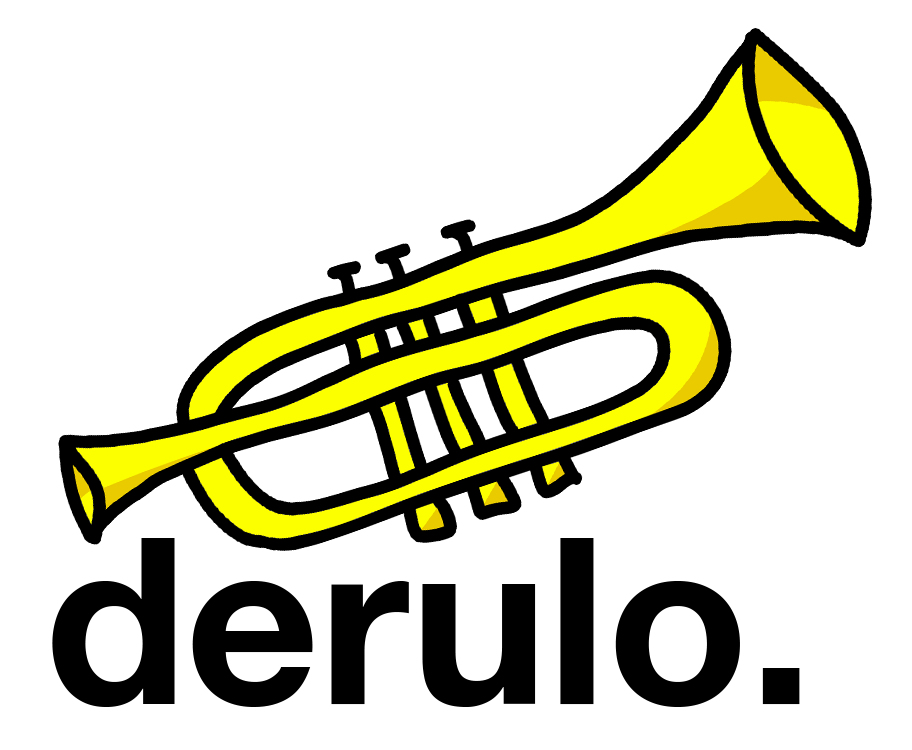
<style>
.page{position:relative;width:912px;height:750px;background:#ffffff}
.page>*{position:absolute;margin:0}
.t1{font:231.9px "HelveticaNeue-Bold";color:#000000}
</style>
<div class="page">
<p class="t1" style="left:52px;top:538px;width:748px;height:169px">derulo.</p>
</div>
